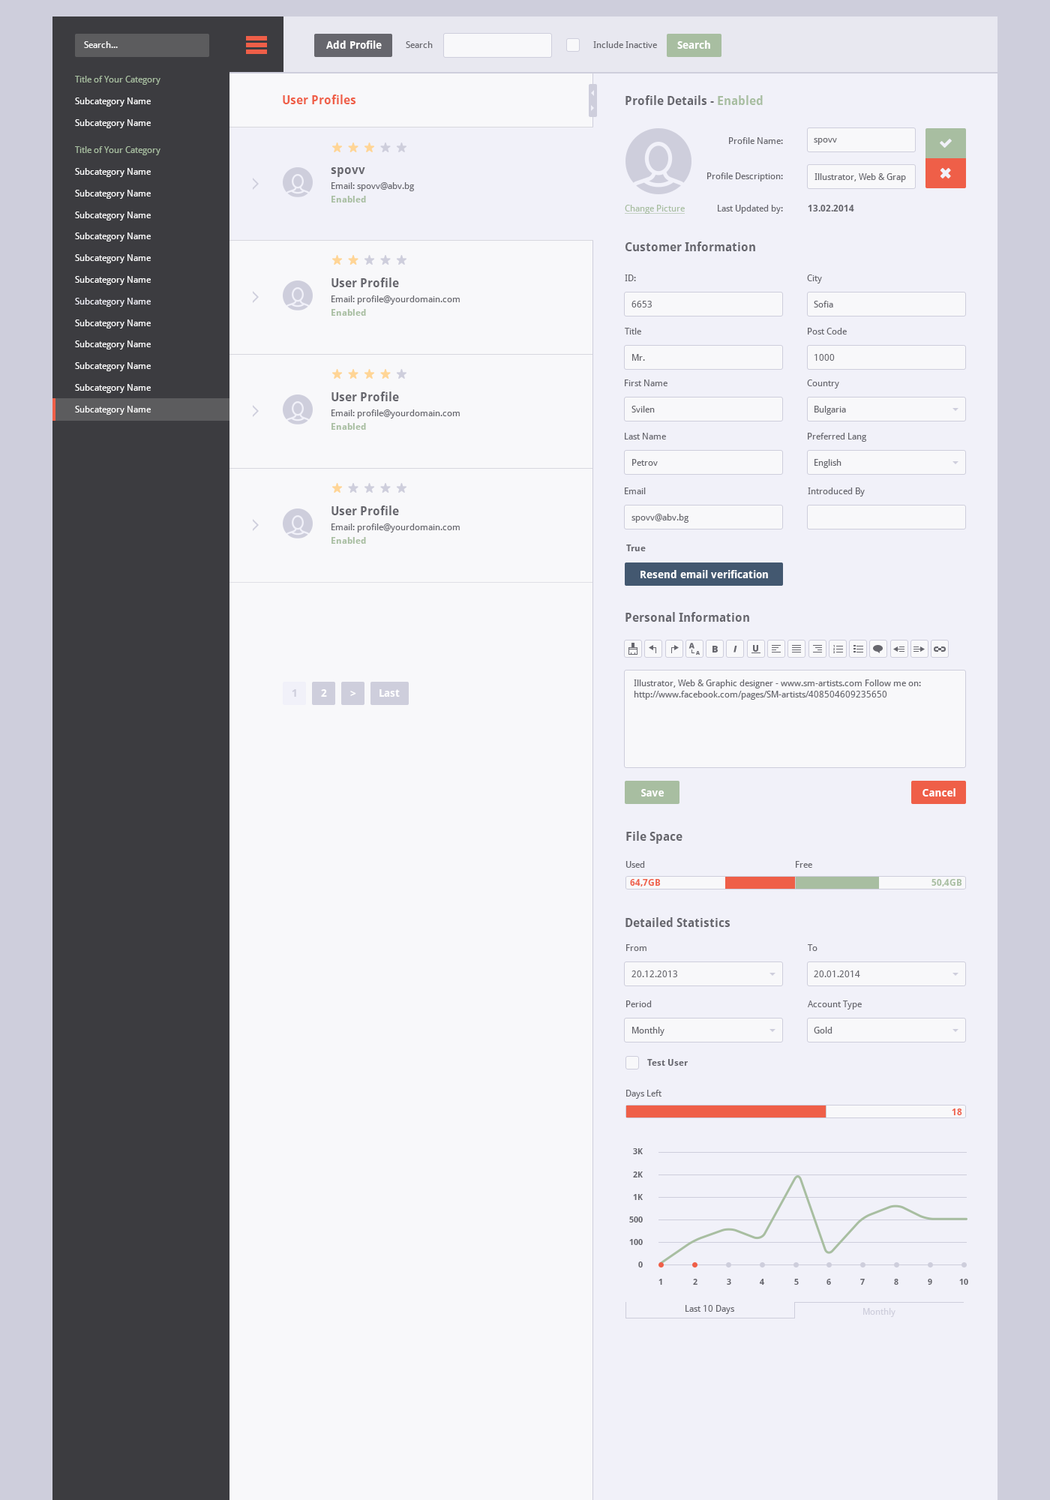
<style>
.page{position:relative;width:1050px;height:1500px;background:#f8f8fa}
.page>*{position:absolute;margin:0}
.t1{font:9px "DroidSans";color:#ffffff}
.t2{font:10.5px "DroidSans-Bold";color:#ffffff}
.t3{font:9px "DroidSans";color:#66666d}
.t4{font:9px "DroidSans";color:#a8bea1}
.t5{font:12px "DroidSans-Bold";color:#ef5f48}
.t6{font:12px "DroidSans-Bold";color:#66666d}
.t7{font:12px "DroidSans-Bold";color:#a8bea1}
.t8{font:9px/12px "DroidSans";color:#66666d}
.t9{font:9px "DroidSans";color:#f1f1f9}
.t10{font:9px/13.5px "DroidSans";color:#66666d}
.t11{font:9px/13.5px "DroidSans-Bold";color:#a8bea1}
.t12{font:9px "DroidSans";color:#a8bea1;text-decoration:underline}
.t13{font:9px "DroidSans-Bold";color:#66666d}
.t14{font:10.5px "DroidSans-Bold";color:#cecedc}
.t15{font:9px "DroidSans-Bold";color:#ef5f48}
.t16{font:9px "DroidSans-Bold";color:#a8bea1}
.t17{font:8.2px "DroidSans-Bold";color:#66666d}
.t18{font:9px "DroidSans";color:#cecedc}
</style>
<div class="page">
<p class="t1" style="left:84px;top:41px;width:34px;height:7px">Search...</p>
<p class="t2" style="left:326px;top:40px;width:56px;height:9px">Add Profile</p>
<p class="t3" style="left:406px;top:41px;width:27px;height:7px">Search</p>
<p class="t3" style="left:593px;top:41px;width:64px;height:7px">Include Inactive</p>
<p class="t2" style="left:677px;top:40px;width:33px;height:9px">Search</p>
<p class="t1" style="left:75px;top:76px;width:85px;height:52px"><span class="t4">Title of Your Category<br><br></span>Subcategory Name<br><br>Subcategory Name</p>
<p class="t5" style="left:283px;top:94px;width:73px;height:10px">User Profiles</p>
<p class="t6" style="left:626px;top:95px;width:137px;height:10px">Profile Details - <span class="t7">Enabled</span></p>
<p class="t8" style="left:707px;top:137px;width:76px;height:77px;text-align:right"><span class="t3">Profile Name:<br><br></span><br>Profile Description:<br><span class="t3"><br><br>Last Updated by:</span></p>
<p class="t1" style="left:75px;top:146px;width:85px;height:269px"><span class="t4">Title of Your Category<br><br></span>Subcategory Name<br><br>Subcategory Name<br><br>Subcategory Name<br><br>Subcategory Name<br><br>Subcategory Name<br><br>Subcategory Name<br><br><span class="t9">Subcategory Name<br></span><br>Subcategory Name<br><br>Subcategory Name<br><br>Subcategory Name<br><br>Subcategory Name<br><br>Subcategory Name</p>
<p class="t3" style="left:814px;top:138px;width:23px;height:7px">spovv</p>
<p class="t6" style="left:331px;top:167px;width:34px;height:10px">spovv</p>
<p class="t3" style="left:814px;top:173px;width:92px;height:9px">Illustrator, Web &amp; Grap</p>
<p class="t10" style="left:332px;top:182px;width:83px;height:20px">Email: spovv@abv.bg<br><span class="t11">Enabled</span></p>
<p class="t12" style="left:625px;top:205px;width:60px;height:9px">Change Picture</p>
<p class="t13" style="left:808px;top:205px;width:46px;height:7px">13.02.2014</p>
<p class="t6" style="left:626px;top:242px;width:129px;height:9px">Customer Information</p>
<p class="t6" style="left:332px;top:278px;width:67px;height:9px">User Profile</p>
<p class="t3" style="left:625px;top:274px;width:11px;height:7px">ID:</p>
<p class="t3" style="left:807px;top:274px;width:15px;height:10px">City</p>
<p class="t10" style="left:332px;top:296px;width:128px;height:20px">Email: profile@yourdomain.com<br><span class="t11">Enabled</span></p>
<p class="t3" style="left:632px;top:301px;width:20px;height:7px">6653</p>
<p class="t3" style="left:814px;top:301px;width:19px;height:7px">Sofia</p>
<p class="t3" style="left:625px;top:328px;width:16px;height:6px">Title</p>
<p class="t3" style="left:808px;top:328px;width:39px;height:6px">Post Code</p>
<p class="t3" style="left:632px;top:354px;width:13px;height:7px">Mr.</p>
<p class="t3" style="left:814px;top:354px;width:21px;height:7px">1000</p>
<p class="t3" style="left:625px;top:380px;width:43px;height:6px">First Name</p>
<p class="t3" style="left:807px;top:380px;width:32px;height:8px">Country</p>
<p class="t6" style="left:332px;top:392px;width:67px;height:9px">User Profile</p>
<p class="t10" style="left:332px;top:410px;width:128px;height:20px">Email: profile@yourdomain.com<br><span class="t11">Enabled</span></p>
<p class="t3" style="left:632px;top:406px;width:23px;height:6px">Svilen</p>
<p class="t3" style="left:814px;top:406px;width:32px;height:9px">Bulgaria</p>
<p class="t3" style="left:625px;top:433px;width:41px;height:7px">Last Name</p>
<p class="t3" style="left:808px;top:433px;width:59px;height:9px">Preferred Lang</p>
<p class="t3" style="left:632px;top:459px;width:26px;height:7px">Petrov</p>
<p class="t3" style="left:814px;top:459px;width:28px;height:9px">English</p>
<p class="t3" style="left:625px;top:488px;width:21px;height:6px">Email</p>
<p class="t3" style="left:808px;top:488px;width:57px;height:8px">Introduced By</p>
<p class="t6" style="left:332px;top:506px;width:67px;height:9px">User Profile</p>
<p class="t3" style="left:632px;top:514px;width:57px;height:9px">spovv@abv.bg</p>
<p class="t10" style="left:332px;top:524px;width:128px;height:20px">Email: profile@yourdomain.com<br><span class="t11">Enabled</span></p>
<p class="t13" style="left:626px;top:544px;width:20px;height:7px">True</p>
<p class="t2" style="left:640px;top:570px;width:128px;height:8px">Resend email verification</p>
<p class="t6" style="left:626px;top:612px;width:123px;height:10px">Personal Information</p>
<p class="t14" style="left:292px;top:689px;width:4px;height:8px">1</p>
<p class="t2" style="left:321px;top:689px;width:6px;height:8px">2</p>
<p class="t2" style="left:380px;top:689px;width:20px;height:8px">Last</p>
<p class="t3" style="left:634px;top:680px;width:287px;height:20px">Illustrator, Web &amp; Graphic designer - www.sm-artists.com Follow me on:<br>http://www.facebook.com/pages/SM-artists/408504609235650</p>
<p class="t2" style="left:350px;top:691px;width:6px;height:5px">&gt;</p>
<p class="t2" style="left:641px;top:789px;width:23px;height:7px">Save</p>
<p class="t2" style="left:922px;top:788px;width:34px;height:8px">Cancel</p>
<p class="t6" style="left:626px;top:831px;width:56px;height:13px">File Space</p>
<p class="t3" style="left:626px;top:861px;width:19px;height:7px">Used</p>
<p class="t3" style="left:796px;top:861px;width:16px;height:7px">Free</p>
<p class="t15" style="left:630px;top:879px;width:31px;height:7px">64,7GB</p>
<p class="t16" style="left:932px;top:879px;width:30px;height:7px">50,4GB</p>
<p class="t6" style="left:626px;top:917px;width:104px;height:10px">Detailed Statistics</p>
<p class="t3" style="left:626px;top:944px;width:20px;height:7px">From</p>
<p class="t3" style="left:808px;top:944px;width:10px;height:7px">To</p>
<p class="t3" style="left:632px;top:970px;width:45px;height:7px">20.12.2013</p>
<p class="t3" style="left:814px;top:970px;width:46px;height:7px">20.01.2014</p>
<p class="t3" style="left:626px;top:1000px;width:26px;height:7px">Period</p>
<p class="t3" style="left:808px;top:1000px;width:54px;height:10px">Account Type</p>
<p class="t3" style="left:632px;top:1027px;width:32px;height:9px">Monthly</p>
<p class="t3" style="left:814px;top:1027px;width:18px;height:7px">Gold</p>
<p class="t13" style="left:647px;top:1059px;width:41px;height:7px">Test User</p>
<p class="t3" style="left:626px;top:1090px;width:36px;height:9px">Days Left</p>
<p class="t15" style="left:952px;top:1108px;width:10px;height:7px">18</p>
<p class="t17" style="left:633px;top:1148px;width:10px;height:6px">3K</p>
<p class="t17" style="left:633px;top:1172px;width:10px;height:6px">2K</p>
<p class="t17" style="left:633px;top:1194px;width:10px;height:6px">1K</p>
<p class="t17" style="left:629px;top:1216px;width:14px;height:6px">500</p>
<p class="t17" style="left:629px;top:1239px;width:14px;height:6px">100</p>
<p class="t17" style="left:638px;top:1262px;width:5px;height:6px">0</p>
<p class="t17" style="left:658px;top:1279px;width:4px;height:6px">1</p>
<p class="t17" style="left:693px;top:1279px;width:5px;height:6px">2</p>
<p class="t17" style="left:727px;top:1279px;width:4px;height:6px">3</p>
<p class="t17" style="left:759px;top:1279px;width:5px;height:6px">4</p>
<p class="t17" style="left:794px;top:1279px;width:5px;height:6px">5</p>
<p class="t17" style="left:826px;top:1279px;width:5px;height:6px">6</p>
<p class="t17" style="left:860px;top:1279px;width:5px;height:6px">7</p>
<p class="t17" style="left:894px;top:1279px;width:4px;height:6px">8</p>
<p class="t17" style="left:928px;top:1279px;width:4px;height:6px">9</p>
<p class="t17" style="left:959px;top:1279px;width:9px;height:6px">10</p>
<p class="t3" style="left:686px;top:1305px;width:48px;height:9px">Last 10 Days</p>
<p class="t18" style="left:863px;top:1308px;width:33px;height:9px">Monthly</p>
</div>
